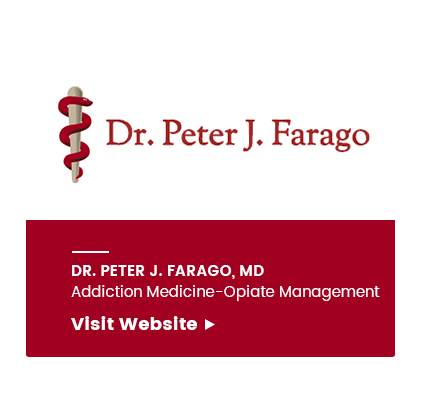
<style>
.page{position:relative;width:428px;height:396px;background:#ffffff}
.page>*{position:absolute;margin:0}
.t1{font:15px/21px "Poppins-Regular";letter-spacing:0.01em;color:#ffffff}
.t2{font:15px/30px "Poppins-SemiBold";letter-spacing:0.01em;color:#ffffff}
.t3{font:18px/33px "Poppins";letter-spacing:0.01em;color:#ffffff}
</style>
<div class="page">
<p class="t1" style="left:71px;top:265px;width:309px;height:65px"><span class="t2">DR. PETER J. FARAGO, MD<br></span>Addiction Medicine-Opiate Management<br><span class="t3">Visit Website</span></p>
</div>
